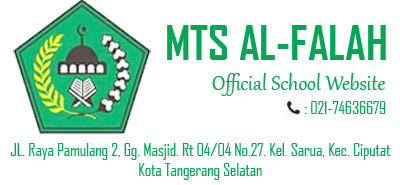
<style>
.page{position:relative;width:400px;height:185px;background:#ffffff}
.page>*{position:absolute;margin:0}
.t1{font:16.7px "AgencyFB-Reg";color:#05a656}
</style>
<div class="page">
<p class="t1" style="left:305px;top:101px;width:81px;height:13px">: 021-74636679</p>
<p class="t1" style="left:10px;top:143px;width:380px;height:37px;text-align:center">JL. Raya Pamulang 2, Gg. Masjid. Rt 04/04 No.27. Kel. Sarua, Kec. Ciputat<br>Kota Tangerang Selatan</p>
</div>
